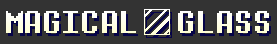
<style>
.page{position:relative;width:277px;height:44px;background:#333333}
.page>*{position:absolute;margin:0}
.t1{font:32px "DeterminationMono";color:#ffffea}
</style>
<div class="page">
<p class="t1" style="left:6px;top:11px;width:263px;height:22px">MAGICAL  GLASS</p>
</div>
